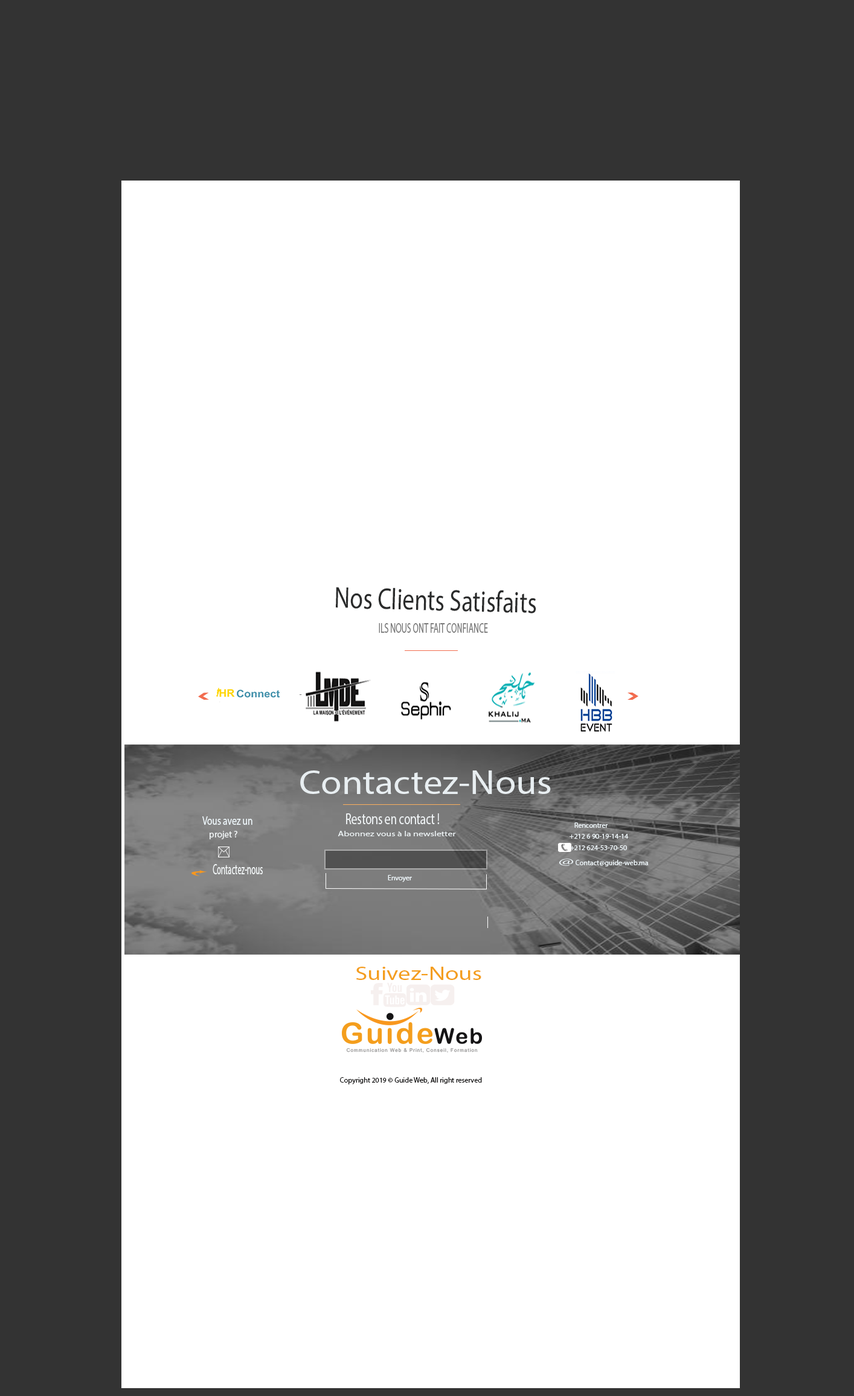
<style>
.page{position:relative;width:854px;height:1396px;background:#ffffff}
.page>*{position:absolute;margin:0}
.t1{font:30px "MyriadPro-Regular";color:#2a2b2b;scale:0.79 1}
.t2{font:13.9px "MyriadPro-Regular";color:#797979;scale:0.6 1}
.t3{font:7.2px "MyriadPro-Regular";color:#797979}
.t4{font:33.9px "MyriadPro-Regular";color:#e8eef1;scale:1.12 1}
.t5{font:11.9px "MyriadPro-Regular";color:#edf5f9;scale:0.78 1}
.t6{font:15.6px "MyriadPro-Regular";color:#eff3f5;scale:0.73 1}
.t7{font:9.2px "MyriadPro-Regular";color:#f2f6f7}
.t8{font:7.2px "MyriadPro-Regular";color:#edf3f5;scale:1.33 1}
.t9{font:7.2px "MyriadPro-Regular";color:#edf5f9}
.t10{font:14.7px "MyriadPro-Regular";color:#f2f6f7;scale:0.52 1}
.t11{font:9.6px "MyriadPro-Regular";color:#edf5f9;scale:2.17 1}
.t12{font:19.3px "MyriadPro-Regular";color:#f49e1d;scale:1.28 1}
.t13{font:7.2px "MyriadPro-Regular";color:#090808}
</style>
<div class="page">
<p class="t1" style="left:336px;top:587px;width:200px;height:27px;rotate:1deg">Nos Clients Satisfaits</p>
<p class="t2" style="left:379px;top:623px;width:109px;height:10px">ILS NOUS ONT FAIT CONFIANCE</p>
<p class="t3" style="left:300px;top:695px;width:2px;height:0px">-</p>
<p class="t4" style="left:300px;top:771px;width:251px;height:23px">Contactez-Nous</p>
<p class="t5" style="left:202px;top:817px;width:50px;height:8px">Vous avez un</p>
<p class="t6" style="left:346px;top:814px;width:93px;height:10px">Restons en contact !</p>
<p class="t7" style="left:210px;top:831px;width:27px;height:8px">projet ?</p>
<p class="t8" style="left:338px;top:831px;width:118px;height:5px">Abonnez vous à la newsletter</p>
<p class="t9" style="left:574px;top:823px;width:34px;height:5px">Rencontrer</p>
<p class="t9" style="left:570px;top:834px;width:59px;height:5px">+212 6 90-19-14-14</p>
<p class="t9" style="left:570px;top:846px;width:57px;height:4px">+212 624-53-70-50</p>
<p class="t10" style="left:213px;top:864px;width:50px;height:11px">Contactez-nous</p>
<p class="t11" style="left:559px;top:859px;width:14px;height:7px">@</p>
<p class="t9" style="left:576px;top:860px;width:73px;height:7px">Contact@guide-web.ma</p>
<p class="t9" style="left:388px;top:875px;width:24px;height:7px">Envoyer</p>
<p class="t12" style="left:356px;top:967px;width:125px;height:13px">Suivez-Nous</p>
<p class="t13" style="left:340px;top:1077px;width:142px;height:8px">Copyright 2019 © Guide Web, All right reserved</p>
</div>
